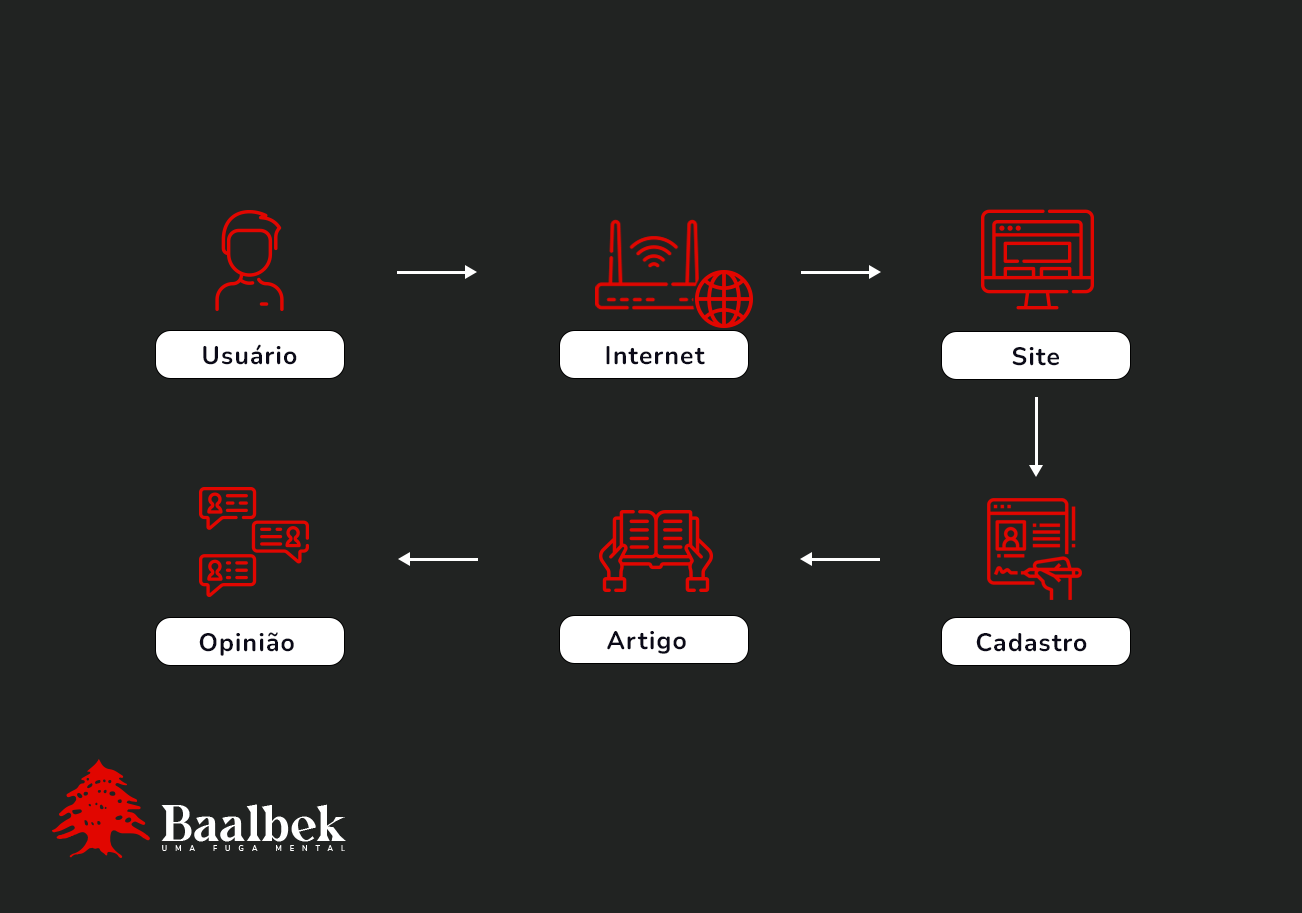
<style>
.page{position:relative;width:1302px;height:913px;background:#212322}
.page>*{position:absolute;margin:0}
.t1{font:24.9px "Nunito-Bold";letter-spacing:0.05em;color:#0b0a18}
</style>
<div class="page">
<p class="t1" style="left:203px;top:344px;width:94px;height:21px">Usuário</p>
<p class="t1" style="left:606px;top:346px;width:99px;height:19px">Internet</p>
<p class="t1" style="left:1012px;top:347px;width:47px;height:19px">Site</p>
<p class="t1" style="left:199px;top:632px;width:95px;height:24px">Opinião</p>
<p class="t1" style="left:607px;top:631px;width:79px;height:23px">Artigo</p>
<p class="t1" style="left:976px;top:633px;width:111px;height:19px">Cadastro</p>
</div>
